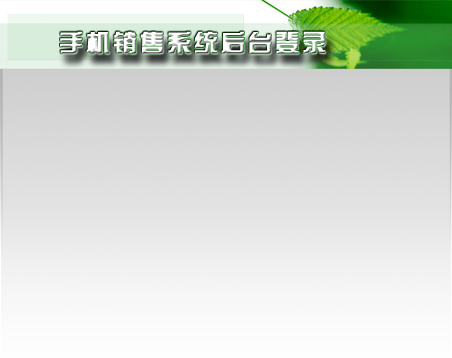
<style>
.page{position:relative;width:452px;height:358px}
.page>*{position:absolute;margin:0}
.t1{font:24px "BDZYJT--GB1-0";letter-spacing:0.1em;color:#ffffff;font-weight:bold}
.t2{font:28px "Garamond-Bold";letter-spacing:0.1em;color:#ffffff;font-weight:bold}
</style>
<div class="page">
<p class="t1" style="left:60px;top:31px;width:266px;height:23px"><span class="t2">手机</span>手机销售系统后台登录</p>
</div>
